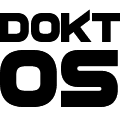
<style>
.page{position:relative;width:120px;height:120px;background:#ffffff}
.page>*{position:absolute;margin:0}
.t1{font:41.7px "Neuterous";color:#000000}
.t2{font:83.3px "Neuterous";color:#000000}
</style>
<div class="page">
<p class="t1" style="left:0px;top:9px;width:121px;height:33px">dokt</p>
<p class="t2" style="left:0px;top:50px;width:118px;height:57px">OS</p>
</div>
